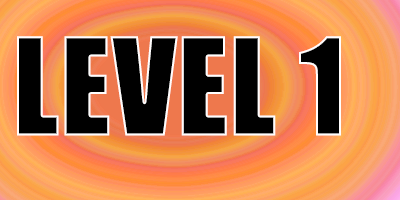
<style>
.page{position:relative;width:400px;height:200px;background:#000000}
.page>*{position:absolute;margin:0}
.t1{font:125px "Impact";color:#000000}
</style>
<div class="page">
<p class="t1" style="left:17px;top:36px;width:324px;height:100px">LEVEL 1</p>
</div>
